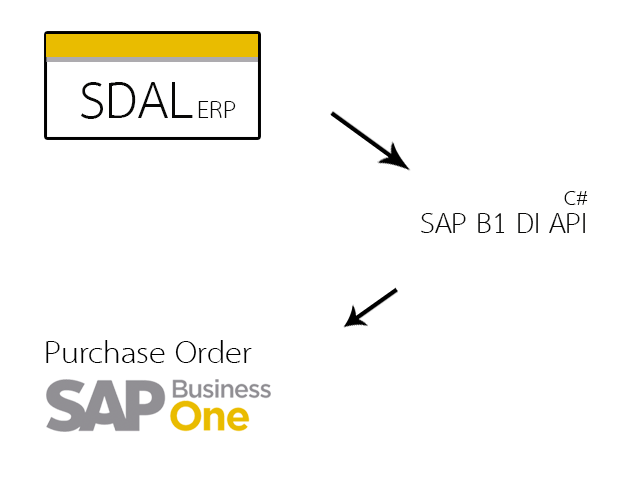
<style>
.page{position:relative;width:640px;height:480px;background:#ffffff}
.page>*{position:absolute;margin:0}
.t1{font:75.1px "THSarabunNew";color:#080807}
.t2{font:35.4px "THSarabunNew";color:#080807}
.t3{font:30px "THSarabunNew";color:#080807}
.t4{font:41.4px "THSarabunNew";color:#080807}
.t5{font:44.9px "THSarabunNew";color:#000000}
</style>
<div class="page">
<p class="t1" style="left:81px;top:82px;width:112px;height:37px">SDAL</p>
<p class="t2" style="left:198px;top:101px;width:38px;height:17px">ERP</p>
<p class="t3" style="left:564px;top:191px;width:24px;height:14px">C#</p>
<p class="t4" style="left:421px;top:213px;width:164px;height:20px">SAP B1 DI API</p>
<p class="t5" style="left:46px;top:340px;width:206px;height:23px">Purchase Order</p>
</div>
